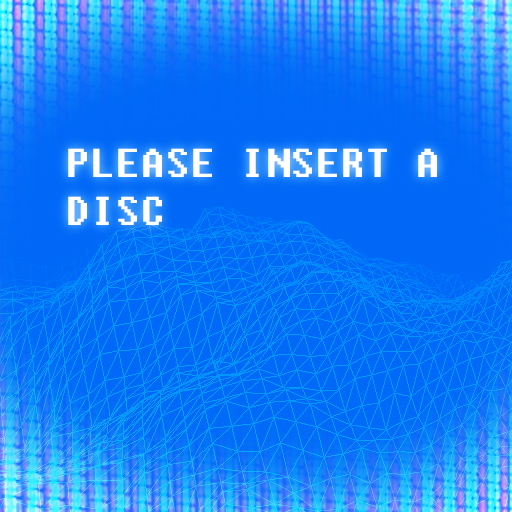
<style>
.page{position:relative;width:512px;height:512px}
.page>*{position:absolute;margin:0}
.t1{font:40px "Fixedsys";color:#ffffff}
</style>
<div class="page">
<p class="t1" style="left:68px;top:148px;width:369px;height:77px">PLEASE INSERT A DISC</p>
</div>
